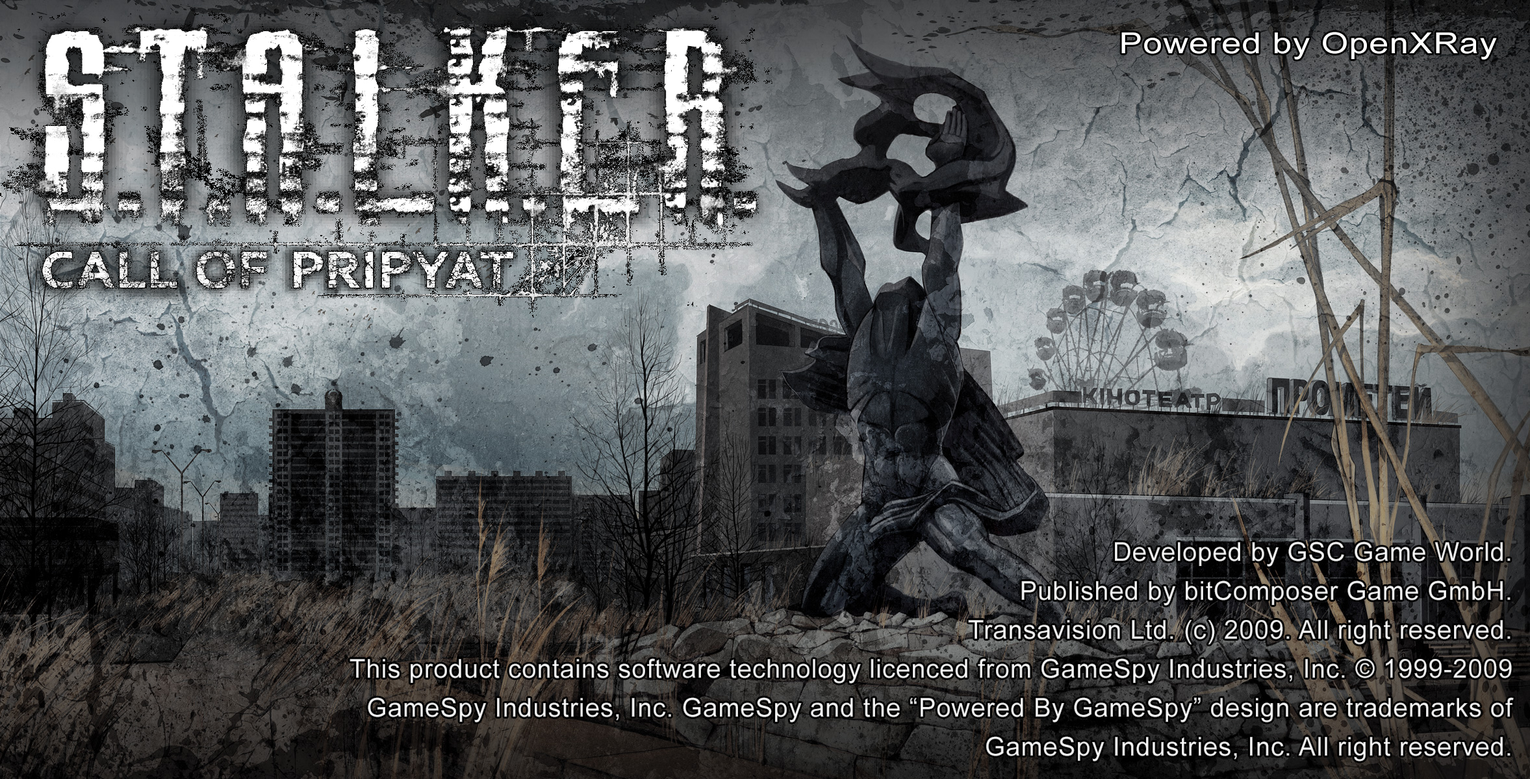
<style>
.page{position:relative;width:1530px;height:779px}
.page>*{position:absolute;margin:0}
.t1{font:29.1px "ArialMT";letter-spacing:0.025em;color:#ffffff;scale:1.19 1}
.t2{font:26px/39px "ArialMT";letter-spacing:0.025em}
</style>
<div class="page">
<p class="t1" style="left:1121px;top:32px;width:376px;height:28px">Powered by OpenXRay</p>
<p class="t2" style="left:349px;top:542px;width:1165px;height:220px;text-align:right">Developed by GSC Game World.<br>Published by bitComposer Game GmbH.<br>Transavision Ltd. (c) 2009. All right reserved.<br>This product contains software technology licenced from GameSpy Industries, Inc. © 1999-2009<br>GameSpy Industries, Inc. GameSpy and the “Powered By GameSpy” design are trademarks of<br>GameSpy Industries, Inc. All right reserved.</p>
</div>
